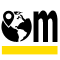
<style>
.page{position:relative;width:60px;height:60px;background:#ffffff}
.page>*{position:absolute;margin:0}
.t1{font:55.6px "Tahoma-Bold";color:#000000;scale:0.52 1}
</style>
<div class="page">
<p class="t1" style="left:33px;top:10px;width:25px;height:32px">m</p>
</div>
